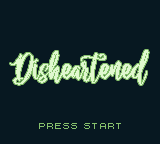
<style>
.page{position:relative;width:160px;height:144px;background:#071821}
.page>*{position:absolute;margin:0}
.t1{font:40px "SailingHeart";color:#e0f8cf}
</style>
<div class="page">
<p class="t1" style="left:10px;top:50px;width:139px;height:35px">Disheartened</p>
</div>
